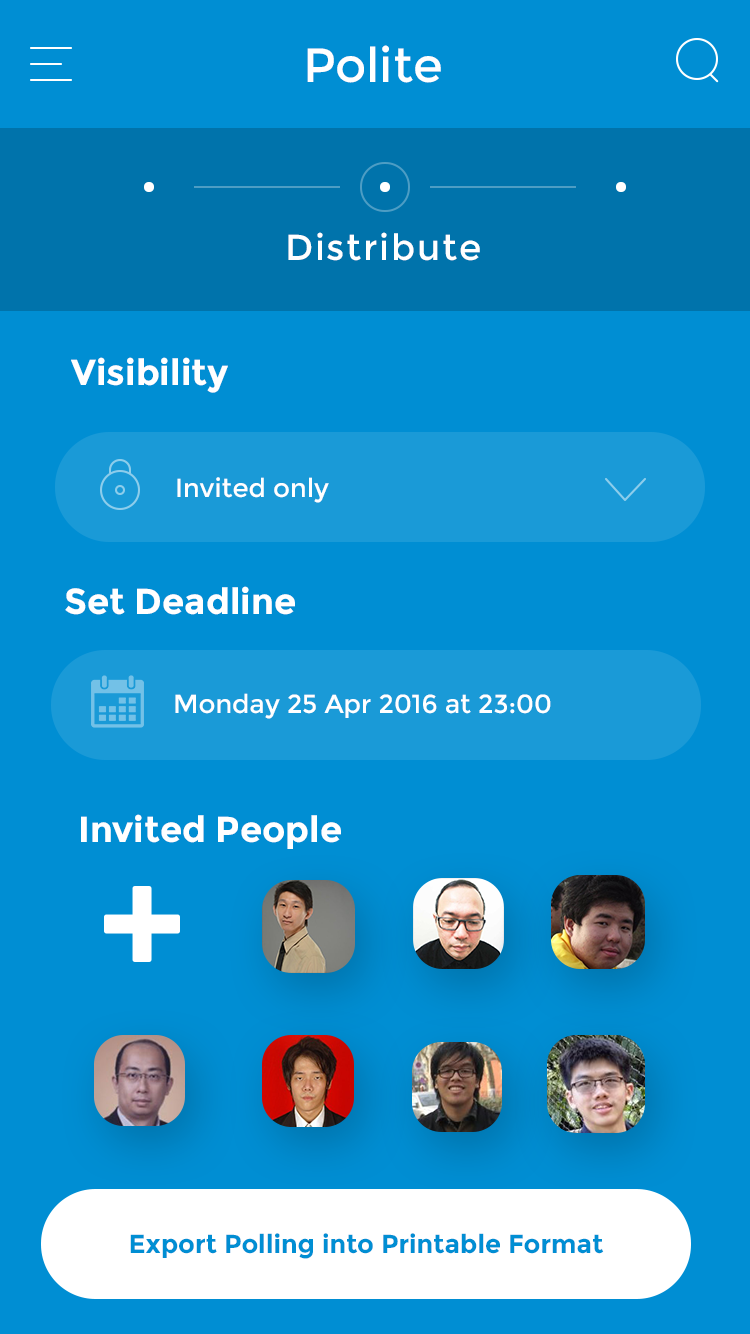
<style>
.page{position:relative;width:750px;height:1334px;background:#008ed3}
.page>*{position:absolute;margin:0}
.t1{font:48px "Montserrat-Regular";color:#ffffff}
.t2{font:36px "Montserrat-Regular";letter-spacing:0.05em;color:#ffffff}
.t3{font:36px "Montserrat-Bold";color:#ffffff}
.t4{font:26px "Montserrat-Regular";color:#ffffff}
.t5{font:26px "Montserrat-Bold";color:#008ed3}
</style>
<div class="page">
<p class="t1" style="left:307px;top:45px;width:134px;height:38px">Polite</p>
<p class="t2" style="left:288px;top:232px;width:192px;height:29px">Distribute</p>
<p class="t3" style="left:71px;top:357px;width:157px;height:36px">Visibility</p>
<p class="t4" style="left:177px;top:477px;width:152px;height:26px">Invited only</p>
<p class="t3" style="left:65px;top:586px;width:230px;height:29px">Set Deadline</p>
<p class="t4" style="left:175px;top:693px;width:376px;height:26px">Monday 25 Apr 2016 at 23:00</p>
<p class="t3" style="left:81px;top:814px;width:260px;height:35px">Invited People</p>
<p class="t5" style="left:130px;top:1233px;width:474px;height:26px">Export Polling into Printable Format</p>
</div>
